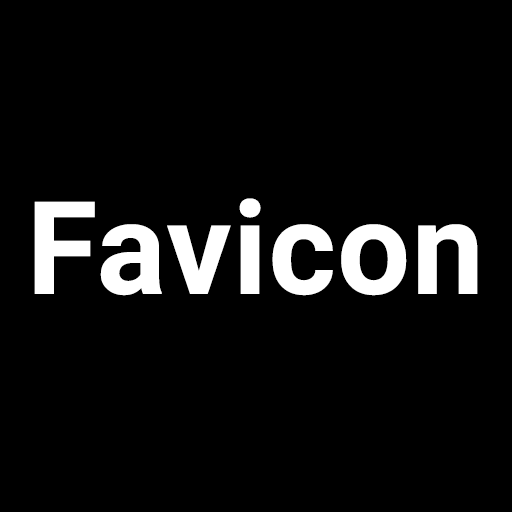
<style>
.page{position:relative;width:512px;height:512px;background:#000000}
.page>*{position:absolute;margin:0}
.t1{font:129.3px "Roboto-Bold";letter-spacing:0.01em;color:#ffffff}
</style>
<div class="page">
<p class="t1" style="left:34px;top:198px;width:444px;height:98px">Favicon</p>
</div>
